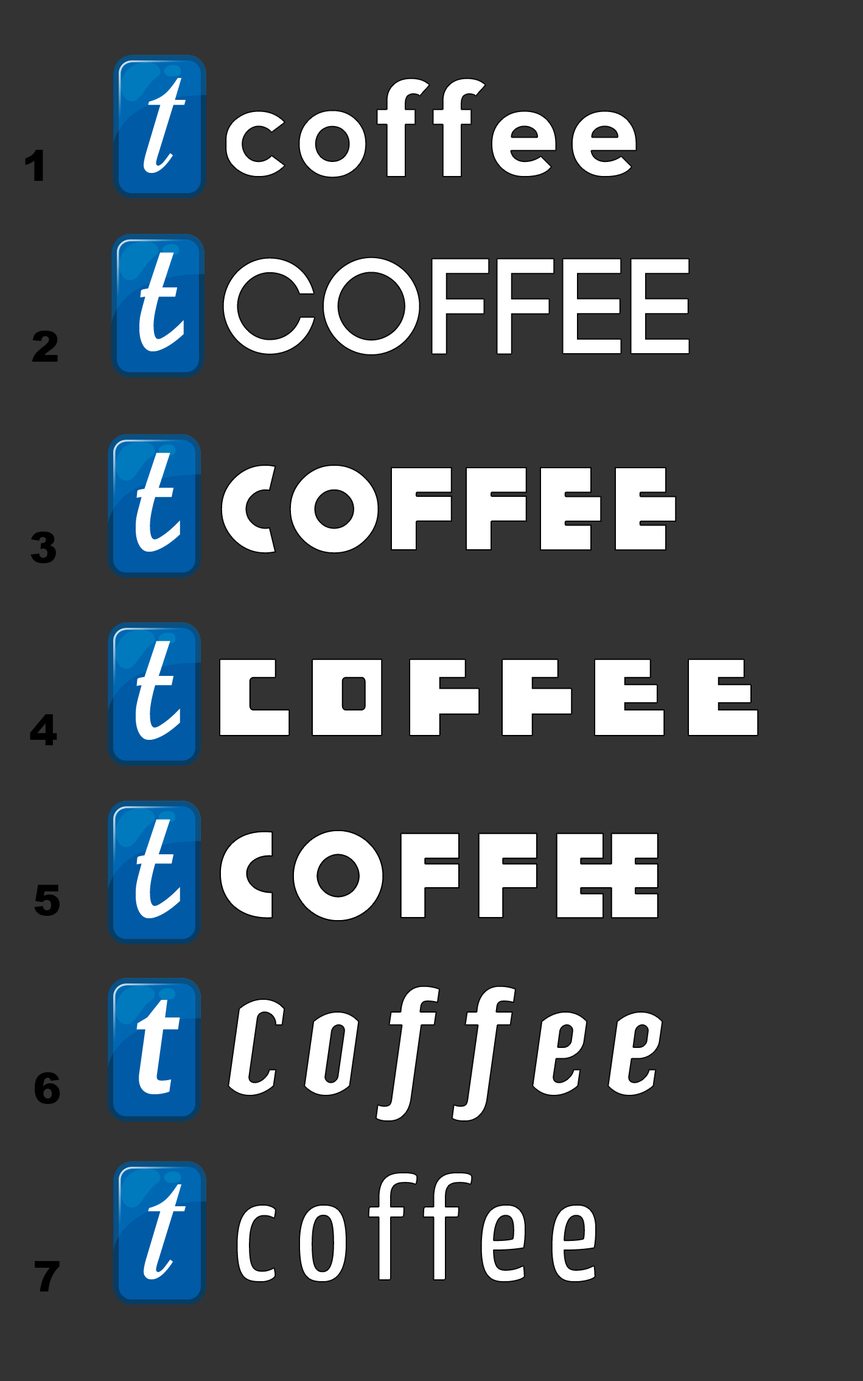
<style>
.page{position:relative;width:863px;height:1381px;background:#333333}
.page>*{position:absolute;margin:0}
.t1{font:164.4px "TimesNewRomanPS-ItalicMT";color:#ffffff}
.t2{font:134px "nevis-Bold";letter-spacing:0.04em;color:#ffffff}
.t3{font:42.6px "Arial-Black";color:#000000}
.t4{font:164.4px "JCfg";color:#ffffff}
.t5{font:134px "Code-Bold";letter-spacing:0.04em;color:#ffffff}
.t6{font:121.8px "KiloGram";letter-spacing:0.08em;color:#ffffff}
.t7{font:134px "Trottoir";letter-spacing:0.08em;color:#ffffff;scale:0.91 1}
.t8{font:119.3px "Geomancy-ExtraBold";letter-spacing:0.1em;color:#ffffff}
.t9{font:146.1px "TElerysmMono2-Italic";letter-spacing:0.08em;color:#ffffff}
.t10{font:134px "TElerysmMono2-Italic";color:#ffffff}
.t11{font:146.1px "YanoneKaffeesatz-Regular";letter-spacing:0.12em;color:#ffffff}
</style>
<div class="page">
<p class="t1" style="left:144px;top:78px;width:42px;height:96px">t</p>
<p class="t2" style="left:226px;top:78px;width:411px;height:100px">coffee</p>
<p class="t3" style="left:25px;top:150px;width:18px;height:31px">1</p>
<p class="t4" style="left:139px;top:252px;width:45px;height:99px">t</p>
<p class="t5" style="left:223px;top:258px;width:466px;height:96px">COFFEE</p>
<p class="t3" style="left:32px;top:331px;width:26px;height:31px">2</p>
<p class="t4" style="left:136px;top:452px;width:44px;height:100px">t</p>
<p class="t6" style="left:220px;top:465px;width:457px;height:89px">cOFFee</p>
<p class="t3" style="left:30px;top:532px;width:26px;height:31px">3</p>
<p class="t4" style="left:136px;top:641px;width:44px;height:99px">t</p>
<p class="t7" style="left:220px;top:659px;width:538px;height:76px">coffee</p>
<p class="t3" style="left:30px;top:714px;width:27px;height:31px">4</p>
<p class="t4" style="left:136px;top:819px;width:44px;height:99px">t</p>
<p class="t4" style="left:136px;top:819px;width:44px;height:99px">t</p>
<p class="t8" style="left:220px;top:831px;width:438px;height:90px">COFFee</p>
<p class="t8" style="left:220px;top:831px;width:438px;height:90px">COFFee</p>
<p class="t3" style="left:34px;top:885px;width:26px;height:31px">5</p>
<p class="t9" style="left:228px;top:986px;width:435px;height:135px">Coffee</p>
<p class="t4" style="left:136px;top:996px;width:44px;height:99px">t</p>
<p class="t10" style="left:136px;top:1000px;width:44px;height:94px">t</p>
<p class="t3" style="left:35px;top:1072px;width:25px;height:32px">6</p>
<p class="t11" style="left:237px;top:1173px;width:359px;height:109px">coffee</p>
<p class="t1" style="left:144px;top:1184px;width:42px;height:96px">t</p>
<p class="t3" style="left:35px;top:1261px;width:25px;height:31px">7</p>
</div>
